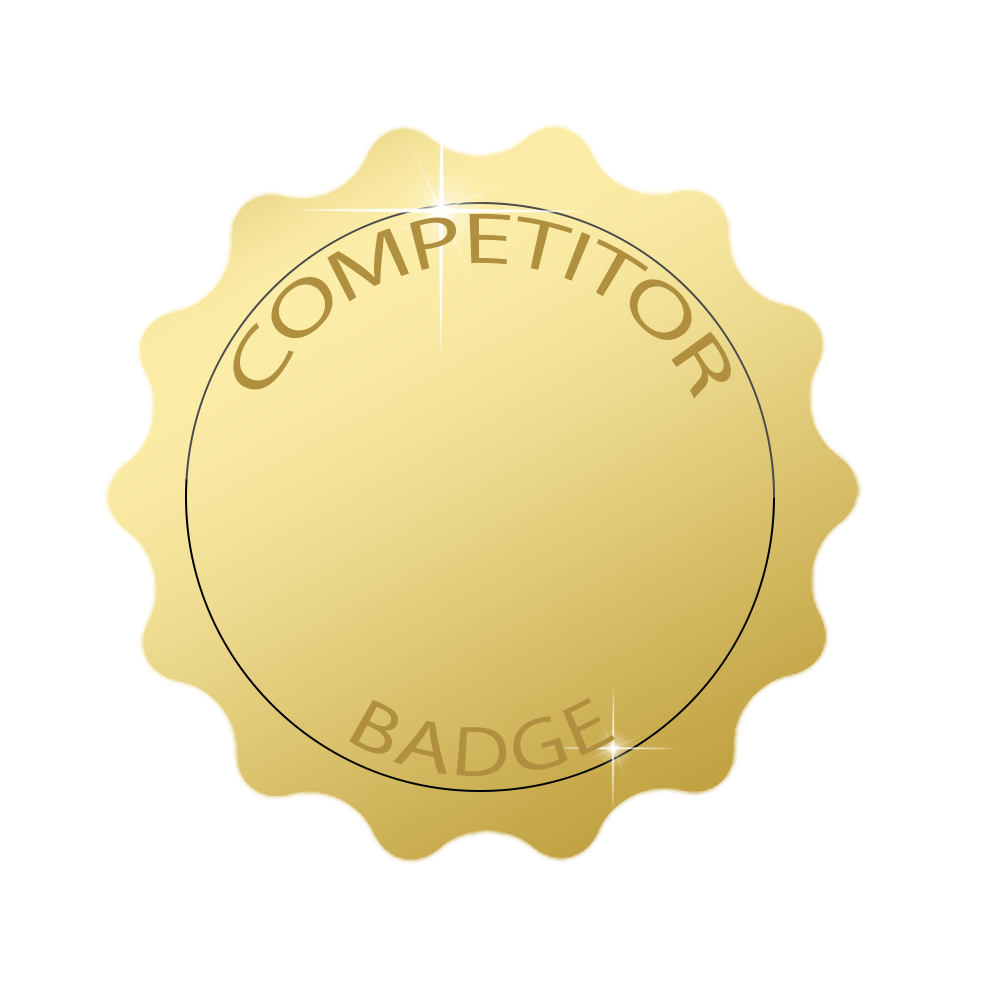
<style>
.page{position:relative;width:1000px;height:1000px;background:#ffffff}
.page>*{position:absolute;margin:0}
.t1{font:72px "MyriadPro-Regular";color:#b0903e}
</style>
<div class="page">
<p class="t1" style="left:233px;top:213px;width:498px;height:186px">COMPETITOR</p>
<p class="t1" style="left:349px;top:697px;width:266px;height:80px">BADGE</p>
</div>
